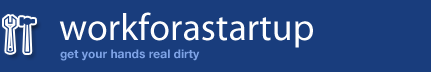
<style>
.page{position:relative;width:431px;height:72px;background:#193d7d}
.page>*{position:absolute;margin:0}
.t1{font:38px "MyriadPro-Regular";color:#fefefe}
.t2{font:12px "HelveticaNeue-Bold";color:#7ea3e6}
</style>
<div class="page">
<p class="t1" style="left:59px;top:12px;width:254px;height:36px">workforastartup</p>
<p class="t2" style="left:60px;top:49px;width:140px;height:12px">get your hands real dirty</p>
</div>
